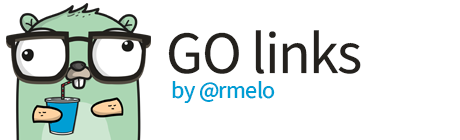
<style>
.page{position:relative;width:460px;height:140px;background:#ffffff}
.page>*{position:absolute;margin:0}
.t1{font:60px "SourceSansRoman-Regular";letter-spacing:-0.025em;color:#24211d}
.t2{font:24px "SourceSansRoman-Regular";letter-spacing:-0.025em;color:#009ed4}
</style>
<div class="page">
<p class="t1" style="left:168px;top:30px;width:193px;height:44px">GO links</p>
<p class="t2" style="left:172px;top:81px;width:103px;height:22px">by @rmelo</p>
</div>
